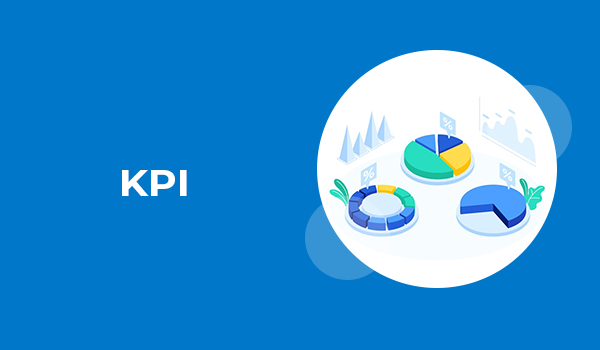
<style>
.page{position:relative;width:600px;height:350px;background:#0077c8}
.page>*{position:absolute;margin:0}
.t1{font:36px "Montserrat-Bold";color:#ffffff;scale:1.1 1}
</style>
<div class="page">
<p class="t1" style="left:122px;top:170px;width:65px;height:26px">KPI</p>
</div>
